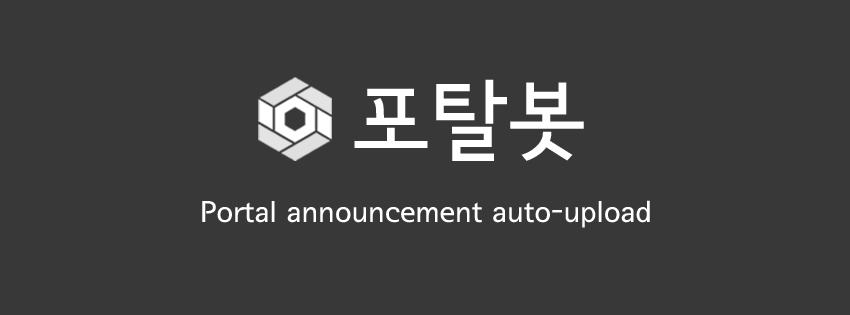
<style>
.page{position:relative;width:850px;height:315px;background:#393838}
.page>*{position:absolute;margin:0}
.t1{font:86.7px "SeoulNamsanB";color:#ffffff}
.t2{font:29.3px "SeoulNamsanB";color:#ffffff}
</style>
<div class="page">
<p class="t1" style="left:354px;top:79px;width:230px;height:82px">포탈봇</p>
<p class="t2" style="left:202px;top:200px;width:448px;height:28px">Portal announcement auto-upload</p>
</div>
